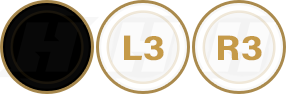
<style>
.page{position:relative;width:286px;height:94px;background:#ffffff}
.page>*{position:absolute;margin:0}
.t1{font:35.9px "AcuminConcept_722.000wght_80.000wdth";color:#c59a48;scale:1.23 1}
</style>
<div class="page">
<p class="t1" style="left:124px;top:35px;width:40px;height:26px">L3</p>
<p class="t1" style="left:218px;top:35px;width:44px;height:26px">R3</p>
</div>
